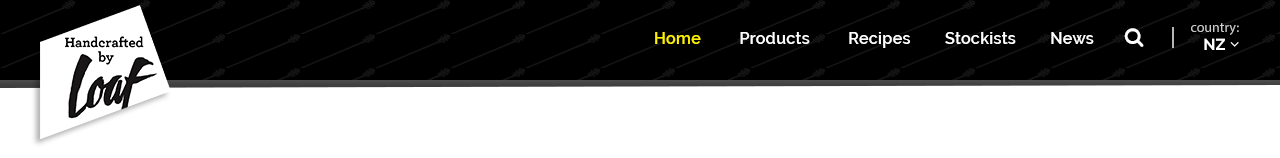
<style>
.page{position:relative;width:1280px;height:158px;background:#ffffff}
.page>*{position:absolute;margin:0}
.t1{font:14px "Raleway-Regular";color:#cbcbcb}
.t2{font:16px "Raleway-SemiBold";letter-spacing:0.02em;color:#ffffff}
.t3{font:16px "Raleway-SemiBold";letter-spacing:0.02em;color:#fff200}
.t4{font:16px "Raleway-Bold";color:#ffffff}
</style>
<div class="page">
<p class="t1" style="left:1191px;top:23px;width:48px;height:12px">country:</p>
<p class="t2" style="left:655px;top:32px;width:439px;height:16px"><span class="t3">Home</span>         Products         Recipes        Stockists        News</p>
<p class="t4" style="left:1204px;top:38px;width:21px;height:12px">NZ</p>
</div>
